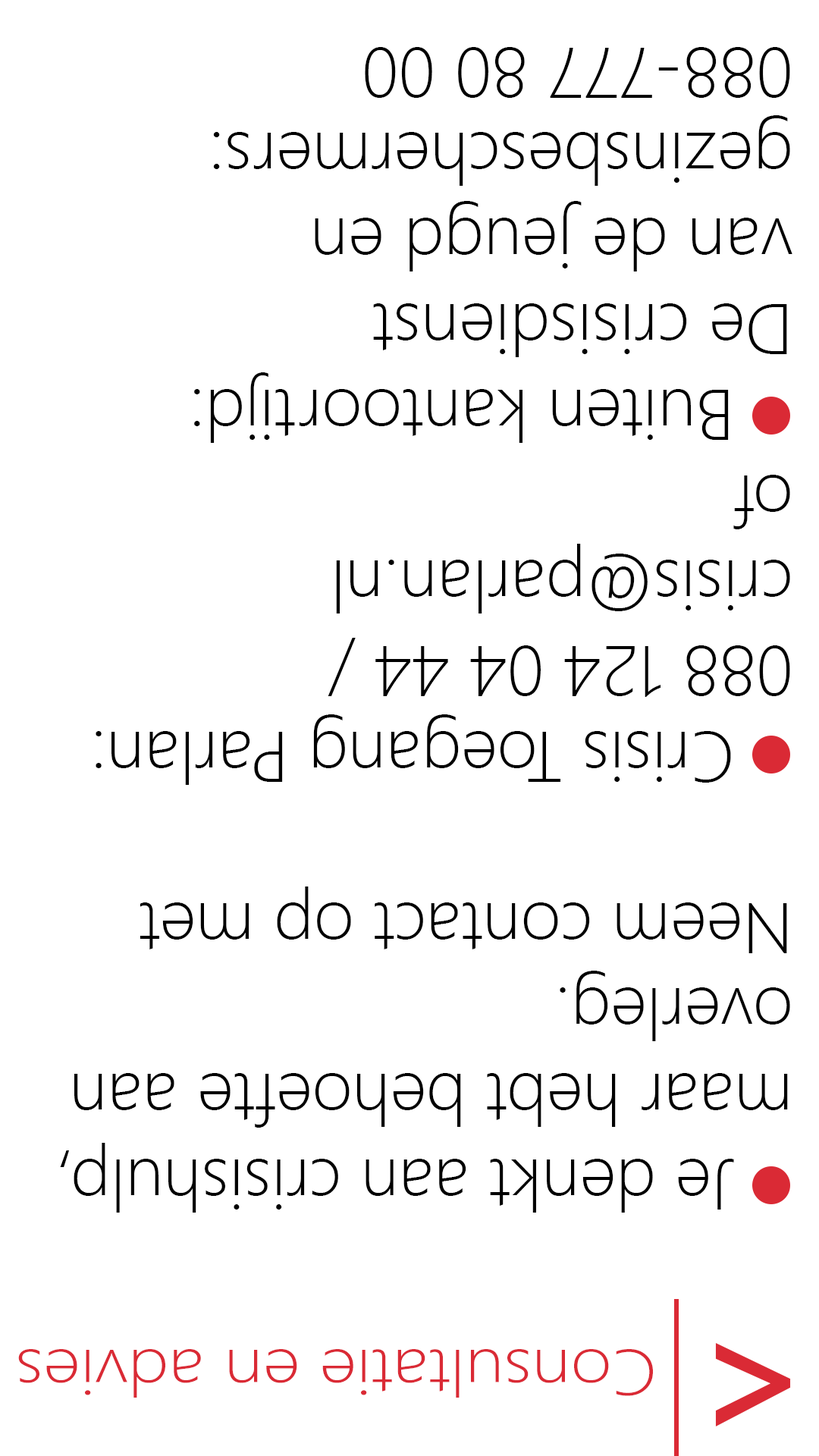
<style>
.page{position:relative;width:819px;height:1456px;background:#ffffff}
.page>*{position:absolute;margin:0}
.t1{font:71.3px "SegoeUI-Light";color:#000000}
.t2{font:64.4px "SegoeUI-Light";color:#da2a35;scale:1.13 1}
.t3{font:170.8px "SegoeUI-Semibold";color:#da2a35}
</style>
<div class="page">
<p class="t1" style="left:60px;top:47px;width:732px;height:1166px;rotate:180deg">Je denkt aan crisishulp, <br>maar hebt behoefte aan <br>overleg. <br>Neem contact op met<br><br>   Crisis Toegang Parlan:<br>088 124 04 44 /<br>crisis@parlan.nl<br>of<br>   Buiten kantoortijd: <br>De crisisdienst <br>van de jeugd en <br>gezinsbeschermers: <br>088-777 80 00</p>
<p class="t2" style="left:18px;top:1349px;width:635px;height:49px;rotate:180deg">Consultatie en advies</p>
<p class="t3" style="left:715px;top:1343px;width:76px;height:83px;rotate:180deg">&lt;</p>
</div>
